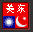
<style>
.page{position:relative;width:33px;height:32px;background:#333333}
.page>*{position:absolute;margin:0}
.t1{font:10.4px "SimSun";color:#ffffff}
</style>
<div class="page">
<p class="t1" style="left:6px;top:4px;width:19px;height:9px">美东</p>
</div>
